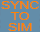
<style>
.page{position:relative;width:40px;height:32px;background:#638da9}
.page>*{position:absolute;margin:0}
.t1{font:10.5px "ArialMT";color:#ff8200;scale:1.3 1}
</style>
<div class="page">
<p class="t1" style="left:1px;top:1px;width:38px;height:30px;text-align:center">SYNC<br>TO<br>SIM</p>
</div>
